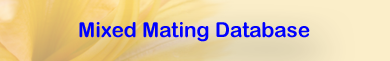
<style>
.page{position:relative;width:390px;height:61px}
.page>*{position:absolute;margin:0}
.t1{font:20.8px "ArialRoundedMTBold";color:#0000ff}
</style>
<div class="page">
<p class="t1" style="left:79px;top:22px;width:231px;height:20px">Mixed Mating Database</p>
</div>
